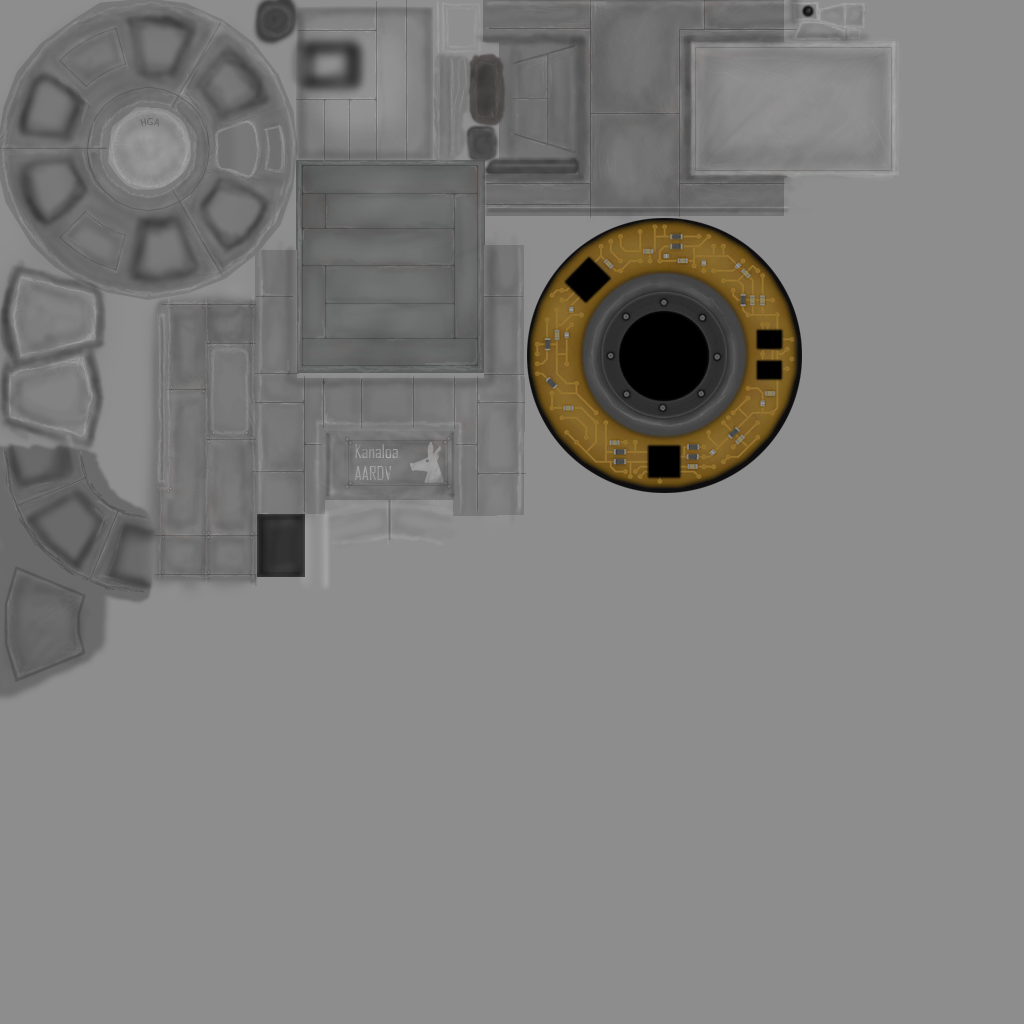
<style>
.page{position:relative;width:1024px;height:1024px;background:#8d8d8d}
.page>*{position:absolute;margin:0}
.t1{font:9px "MyriadPro-Regular";color:#656565}
.t2{font:18px "AgencyFB-Reg";color:#989898}
</style>
<div class="page">
<p class="t1" style="left:140px;top:117px;width:19px;height:10px">HGA</p>
<p class="t2" style="left:355px;top:444px;width:43px;height:36px">Kanaloa<br>AARDV</p>
</div>
